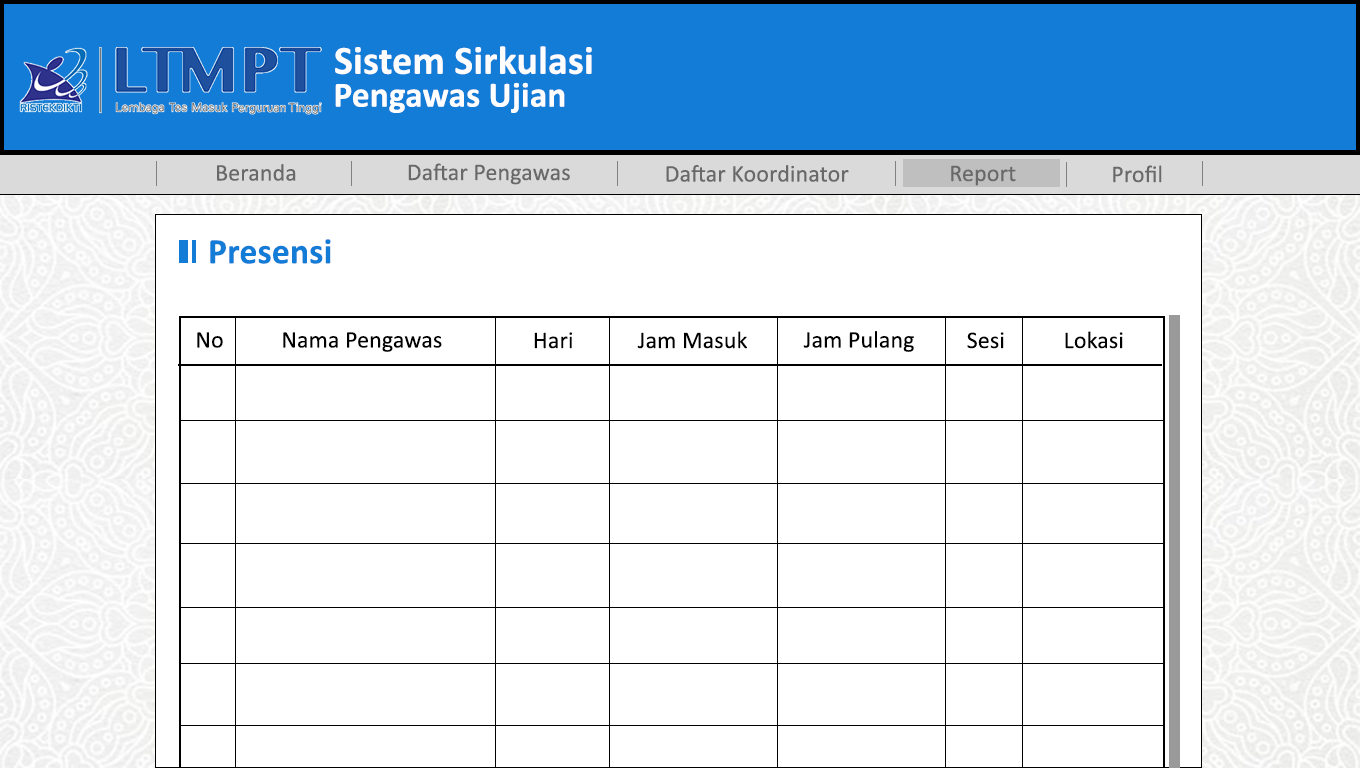
<style>
.page{position:relative;width:1360px;height:768px;background:#ffffff}
.page>*{position:absolute;margin:0}
.t1{font:40.1px "Calibri-Bold";letter-spacing:0.005em;color:#fdfdfd}
.t2{font:35.6px "Calibri-Bold";letter-spacing:0.005em;color:#fffefe}
.t3{font:24px "Calibri";letter-spacing:0.005em;color:#6a6969}
.t4{font:36px "Calibri-Bold";letter-spacing:0.005em;color:#127cd7}
.t5{font:24px "Calibri";letter-spacing:0.005em;color:#000000}
</style>
<div class="page">
<p class="t1" style="left:335px;top:46px;width:257px;height:29px">Sistem Sirkulasi</p>
<p class="t2" style="left:335px;top:82px;width:230px;height:31px">Pengawas Ujian</p>
<p class="t3" style="left:217px;top:164px;width:79px;height:17px">Beranda</p>
<p class="t3" style="left:408px;top:163px;width:162px;height:22px">Daftar Pengawas</p>
<p class="t3" style="left:666px;top:165px;width:183px;height:17px">Daftar Koordinator</p>
<p class="t3" style="left:951px;top:165px;width:65px;height:21px">Report</p>
<p class="t3" style="left:1113px;top:165px;width:49px;height:18px">Profil</p>
<p class="t4" style="left:210px;top:239px;width:121px;height:25px">Presensi</p>
<p class="t5" style="left:197px;top:332px;width:26px;height:16px">No</p>
<p class="t5" style="left:283px;top:332px;width:159px;height:20px">Nama Pengawas</p>
<p class="t5" style="left:534px;top:332px;width:38px;height:17px">Hari</p>
<p class="t5" style="left:637px;top:331px;width:110px;height:18px">Jam Masuk</p>
<p class="t5" style="left:803px;top:331px;width:111px;height:21px">Jam Pulang</p>
<p class="t5" style="left:967px;top:332px;width:37px;height:17px">Sesi</p>
<p class="t5" style="left:1065px;top:331px;width:58px;height:18px">Lokasi</p>
</div>
